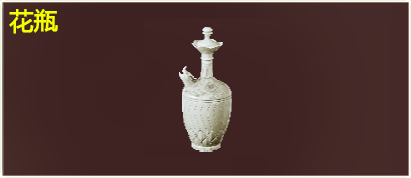
<style>
.page{position:relative;width:411px;height:178px}
.page>*{position:absolute;margin:0}
.t1{font:24px "MicrosoftYaHeiUI";color:#f4ff00;font-weight:bold}
</style>
<div class="page">
<p class="t1" style="left:9px;top:9px;width:49px;height:25px">花瓶</p>
</div>
